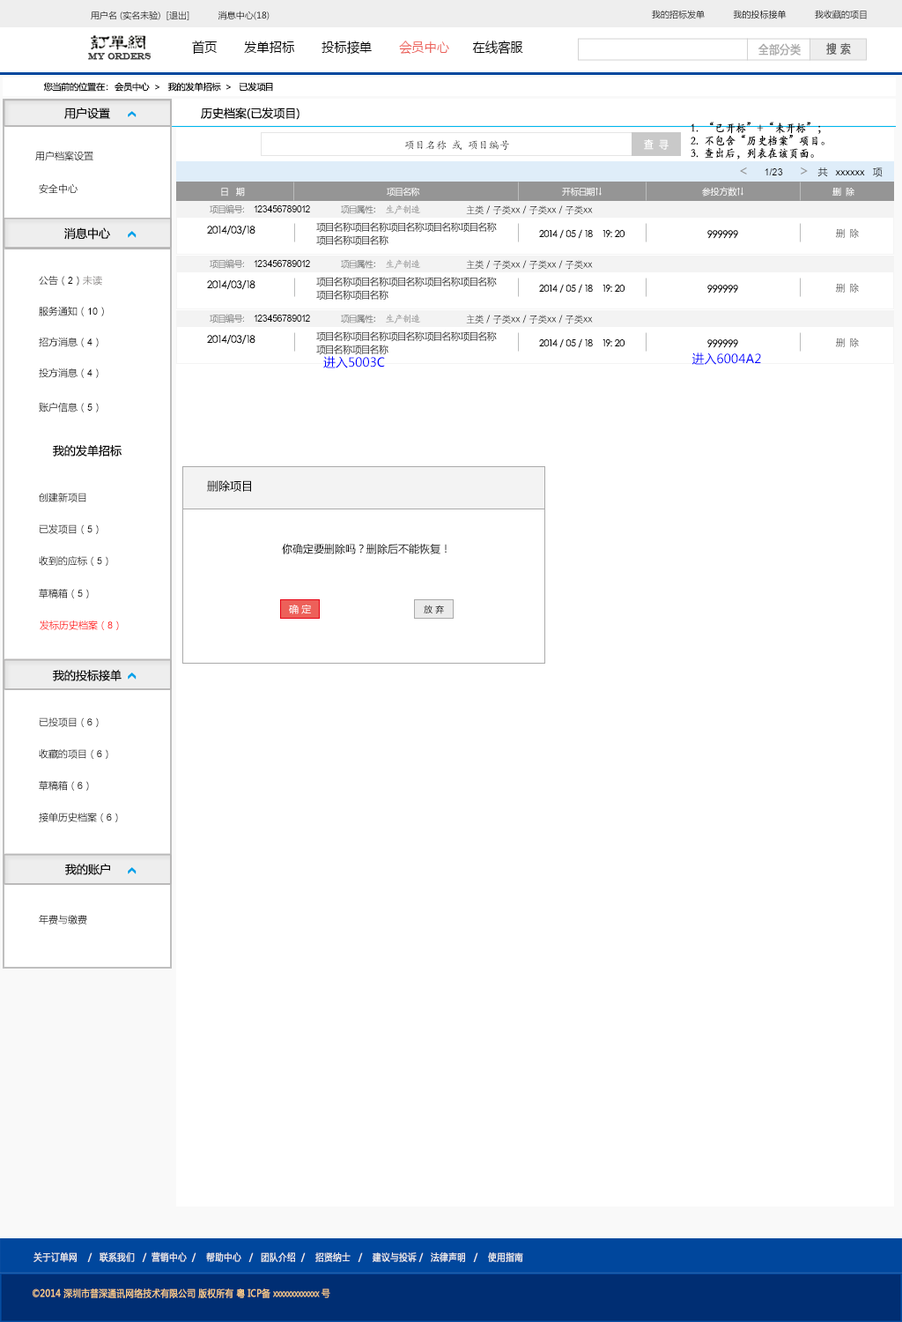
<style>
.page{position:relative;width:902px;height:1322px;background:#ffffff}
.page>*{position:absolute;margin:0}
.t1{font:8.8px "MicrosoftYaHei";color:#000000}
.t2{font:13.6px "MicrosoftYaHei";color:#000000;font-variant:small-caps;scale:0.94 1}
.t3{font:13.6px "MicrosoftYaHei";color:#ed6059;font-variant:small-caps;scale:0.94 1}
.t4{font:8.7px "EngraversMT";color:#434343;font-variant:small-caps;font-weight:bold;scale:0.86 1}
.t5{font:11.6px "MicrosoftYaHei";color:#aaaaaa;font-variant:small-caps;font-weight:bold;scale:0.86 1}
.t6{font:11.6px "MicrosoftYaHei";color:#626262;font-variant:small-caps;font-weight:bold;scale:0.86 1}
.t7{font:8.8px "MicrosoftYaHei";color:#060606}
.t8{font:11.5px "MicrosoftYaHei";color:#060606}
.t9{font:11.6px "STKaiti";color:#000000;font-variant:small-caps;font-weight:bold;scale:0.86 1}
.t10{font:10.6px "KaiTi_GB2312"}
.t11{font:10.7px "MicrosoftYaHei";color:#ffffff;font-variant:small-caps;font-weight:bold;scale:0.86 1}
.t12{font:9.7px "MicrosoftYaHei";color:#060606}
.t13{font:9.7px "ArialMT";color:#060606}
.t14{font:14.1px "MicrosoftYaHei";color:#959595}
.t15{font:9.7px "MicrosoftYaHei"}
.t16{font:8.8px "MicrosoftYaHei";color:#ffffff}
.t17{font:9.7px "ArialMT";color:#000000}
.t18{font:8.8px "MicrosoftYaHei";color:#7a7b7b}
.t19{font:8.8px "YouYuan";color:#7a7b7b}
.t20{font:9.7px "YouYuan";color:#7a7b7b}
.t21{font:9.7px "STKaiti";color:#a0a0a0}
.t22{font:9.7px "STXihei"}
.t23{font:10.6px "STXihei"}
.t24{font:10.6px "STXihei";color:#040404}
.t25{font:14.1px "STXihei";color:#020202}
.t26{font:9.7px/13.2px "MicrosoftYaHei";color:#040404}
.t27{font:9.7px "STXihei";color:#040404}
.t28{font:14.1px "STXihei";color:#040404}
.t29{font:9.7px "MicrosoftYaHei";color:#888584}
.t30{font:12.3px "MicrosoftYaHei";color:#0000ff}
.t31{font:11.5px "MicrosoftYaHei";color:#000000}
.t32{font:9.7px "MicrosoftYaHei";color:#000000}
.t33{font:10.6px "MicrosoftYaHei";color:#000000}
.t34{font:10.6px "SimSun";color:#000000}
.t35{font:9.7px "MicrosoftYaHei";color:#ffffff}
.t36{font:9.7px "MicrosoftYaHei";color:#ff0000}
.t37{font:9.7px "ArialMT";color:#ff0000}
.t38{font:9.7px "MicrosoftYaHei";color:#eeeeee;font-variant:small-caps;font-weight:bold;scale:0.86 1}
.t39{font:13.6px "STXihei";color:#eeeeee;font-variant:small-caps;font-weight:bold;scale:0.86 1}
.t40{font:9.7px "MicrosoftYaHei";color:#facd89;font-variant:small-caps;font-weight:bold;scale:0.87 1}
.t41{font:9.7px "MicrosoftYaHei";color:#eeeeee;font-variant:small-caps;font-weight:bold;scale:0.87 1}
</style>
<div class="page">
<p class="t1" style="left:91px;top:11px;width:179px;height:9px">用户名 (实名未验)  [退出]           消息中心(18)</p>
<p class="t1" style="left:652px;top:10px;width:215px;height:9px">我的招标发单           我的投标接单           我收藏的项目</p>
<p class="t2" style="left:192px;top:41px;width:331px;height:14px">首页       发单招标       投标接单       <span class="t3">会员中心</span>      在线客服</p>
<p class="t4" style="left:88px;top:53px;width:64px;height:7px">MY ORDERS</p>
<p class="t5" style="left:759px;top:43px;width:42px;height:13px">全部分类</p>
<p class="t6" style="left:826px;top:42px;width:25px;height:13px">搜 索</p>
<p class="t7" style="left:43px;top:82px;width:230px;height:10px">您当前的位置在：  会员中心  &gt;   我的发单招标  &gt;   已发项目</p>
<p class="t8" style="left:64px;top:107px;width:46px;height:12px">用户设置</p>
<p class="t8" style="left:201px;top:107px;width:99px;height:13px">历史档案(已发项目)</p>
<p class="t9" style="left:691px;top:122px;width:134px;height:37px">1.  “已开标”+“未开标”；<br>2.  不包含“历史档案”项目。<br>3.  查出后，列表在该页面。</p>
<p class="t10" style="left:404px;top:140px;width:105px;height:11px">项目名称 或 项目编号</p>
<p class="t11" style="left:644px;top:139px;width:25px;height:11px">查  寻</p>
<p class="t12" style="left:35px;top:151px;width:58px;height:10px">用户档案设置</p>
<p class="t13" style="left:740px;top:167px;width:143px;height:10px"><span class="t14">&lt;     </span>1/23     <span class="t14">&gt;  </span><span class="t12">共  </span>xxxxxx  <span class="t12">项</span></p>
<p class="t15" style="left:39px;top:183px;width:39px;height:11px">安全中心</p>
<p class="t16" style="left:221px;top:187px;width:24px;height:9px">日   期</p>
<p class="t16" style="left:387px;top:187px;width:33px;height:9px">项目名称</p>
<p class="t16" style="left:562px;top:187px;width:40px;height:9px">开标日期↑↓</p>
<p class="t16" style="left:702px;top:187px;width:42px;height:9px">参投方数↑↓</p>
<p class="t16" style="left:833px;top:187px;width:22px;height:9px">删  除</p>
<p class="t17" style="left:210px;top:204px;width:100px;height:10px"><span class="t18">项目编号:  </span>123456789012</p>
<p class="t19" style="left:341px;top:204px;width:80px;height:10px">项目属性<span class="t20">:  </span><span class="t21">生产制造</span></p>
<p class="t22" style="left:466px;top:205px;width:127px;height:10px"><span class="t23">           </span>主类 / 子类xx / 子类xx / 子类xx</p>
<p class="t8" style="left:64px;top:227px;width:46px;height:13px">消息中心</p>
<p class="t24" style="left:207px;top:226px;width:49px;height:9px"><span class="t25">   </span>2014/03/18</p>
<p class="t26" style="left:316px;top:222px;width:181px;height:24px">项目名称项目名称项目名称项目名称项目名称<br>项目名称项目名称</p>
<p class="t27" style="left:539px;top:229px;width:86px;height:10px"><span class="t28"> </span>2014 / 05 / 18    19: 20</p>
<p class="t24" style="left:708px;top:230px;width:30px;height:9px"><span class="t28"> </span>999999</p>
<p class="t22" style="left:836px;top:228px;width:23px;height:10px">删  除</p>
<p class="t17" style="left:210px;top:259px;width:100px;height:10px"><span class="t18">项目编号:  </span>123456789012</p>
<p class="t19" style="left:341px;top:259px;width:80px;height:10px">项目属性<span class="t20">:  </span><span class="t21">生产制造</span></p>
<p class="t22" style="left:466px;top:260px;width:127px;height:10px"><span class="t23">           </span>主类 / 子类xx / 子类xx / 子类xx</p>
<p class="t12" style="left:39px;top:275px;width:63px;height:10px">公告（<span class="t13">2</span>）<span class="t29">未读</span></p>
<p class="t24" style="left:207px;top:280px;width:49px;height:10px"><span class="t25">   </span>2014/03/18</p>
<p class="t26" style="left:316px;top:277px;width:181px;height:23px">项目名称项目名称项目名称项目名称项目名称<br>项目名称项目名称</p>
<p class="t27" style="left:539px;top:284px;width:86px;height:9px"><span class="t28"> </span>2014 / 05 / 18    19: 20</p>
<p class="t24" style="left:708px;top:285px;width:30px;height:8px"><span class="t28"> </span>999999</p>
<p class="t22" style="left:836px;top:283px;width:23px;height:10px">删  除</p>
<p class="t12" style="left:39px;top:306px;width:65px;height:10px">服务通知（<span class="t13">10</span>）</p>
<p class="t17" style="left:210px;top:314px;width:100px;height:9px"><span class="t18">项目编号:  </span>123456789012</p>
<p class="t19" style="left:341px;top:314px;width:80px;height:9px">项目属性<span class="t20">:  </span><span class="t21">生产制造</span></p>
<p class="t22" style="left:466px;top:315px;width:127px;height:9px"><span class="t23">           </span>主类 / 子类xx / 子类xx / 子类xx</p>
<p class="t12" style="left:39px;top:337px;width:60px;height:10px">招方消息（<span class="t13">4</span>）</p>
<p class="t24" style="left:207px;top:335px;width:49px;height:10px"><span class="t25">   </span>2014/03/18</p>
<p class="t26" style="left:316px;top:331px;width:181px;height:24px">项目名称项目名称项目名称项目名称项目名称<br>项目名称项目名称</p>
<p class="t27" style="left:539px;top:338px;width:86px;height:10px"><span class="t28"> </span>2014 / 05 / 18    19: 20</p>
<p class="t24" style="left:708px;top:339px;width:30px;height:9px"><span class="t28"> </span>999999</p>
<p class="t22" style="left:836px;top:337px;width:23px;height:10px">删  除</p>
<p class="t30" style="left:692px;top:352px;width:69px;height:13px">进入6004A2</p>
<p class="t30" style="left:323px;top:356px;width:62px;height:12px">进入5003C</p>
<p class="t12" style="left:39px;top:367px;width:60px;height:11px">投方消息（<span class="t13">4</span>）</p>
<p class="t12" style="left:39px;top:402px;width:60px;height:10px">账户信息（<span class="t13">5</span>）</p>
<p class="t8" style="left:53px;top:445px;width:69px;height:11px">我的发单招标</p>
<p class="t31" style="left:207px;top:480px;width:44px;height:12px">删除项目</p>
<p class="t15" style="left:39px;top:493px;width:47px;height:9px">创建新项目</p>
<p class="t32" style="left:39px;top:524px;width:60px;height:10px">已发项目（<span class="t17">5</span>）</p>
<p class="t33" style="left:282px;top:543px;width:165px;height:11px">你确定要删除吗？删除后不能恢复！<span class="t34">☒</span></p>
<p class="t12" style="left:39px;top:556px;width:69px;height:10px">收到的应标（<span class="t13">5</span>）</p>
<p class="t12" style="left:39px;top:589px;width:50px;height:9px">草稿箱（<span class="t13">5</span>）</p>
<p class="t35" style="left:289px;top:604px;width:22px;height:10px">确 定</p>
<p class="t1" style="left:424px;top:604px;width:20px;height:10px">放 弃</p>
<p class="t36" style="left:40px;top:620px;width:79px;height:10px">发标历史档案（<span class="t37">8</span>）</p>
<p class="t8" style="left:53px;top:670px;width:69px;height:11px">我的投标接单</p>
<p class="t12" style="left:39px;top:717px;width:60px;height:10px">已投项目（<span class="t13">6</span>）</p>
<p class="t12" style="left:39px;top:749px;width:69px;height:10px">收藏的项目（<span class="t13">6</span>）</p>
<p class="t12" style="left:39px;top:781px;width:50px;height:9px">草稿箱（<span class="t13">6</span>）</p>
<p class="t12" style="left:39px;top:812px;width:79px;height:10px">接单历史档案（<span class="t13">6</span>）</p>
<p class="t8" style="left:65px;top:863px;width:45px;height:12px">我的账户</p>
<p class="t12" style="left:39px;top:915px;width:48px;height:9px">年费与缴费</p>
<p class="t38" style="left:33px;top:1251px;width:490px;height:11px"><span class="t39"><br><br></span>关于订单网    /   联系我们   /  营销中心  /    帮助中心   /   团队介绍  /    招贤纳士   /    建议与投诉 /   法律声明   /    使用指南</p>
<p class="t40" style="left:33px;top:1288px;width:297px;height:10px"><span class="t41"> </span>©2014 深圳市普深通讯网络技术有限公司 版权所有 粤 ICP备 xxxxxxxxxxxxx 号</p>
</div>
